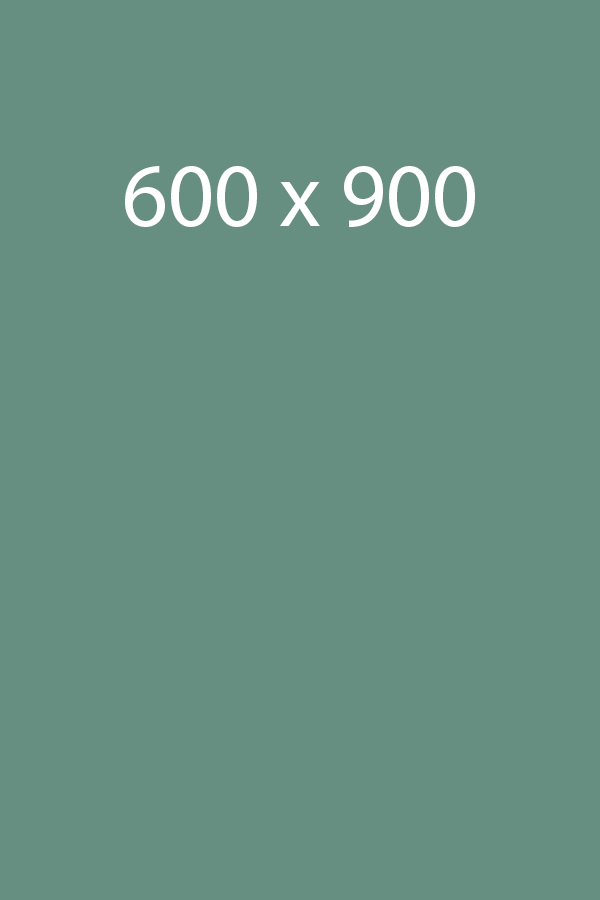
<style>
.page{position:relative;width:600px;height:900px;background:#678f81}
.page>*{position:absolute;margin:0}
.t1{font:90px "MyriadPro-Regular";color:#ffffff}
</style>
<div class="page">
<p class="t1" style="left:125px;top:166px;width:350px;height:61px">600 x 900</p>
</div>
